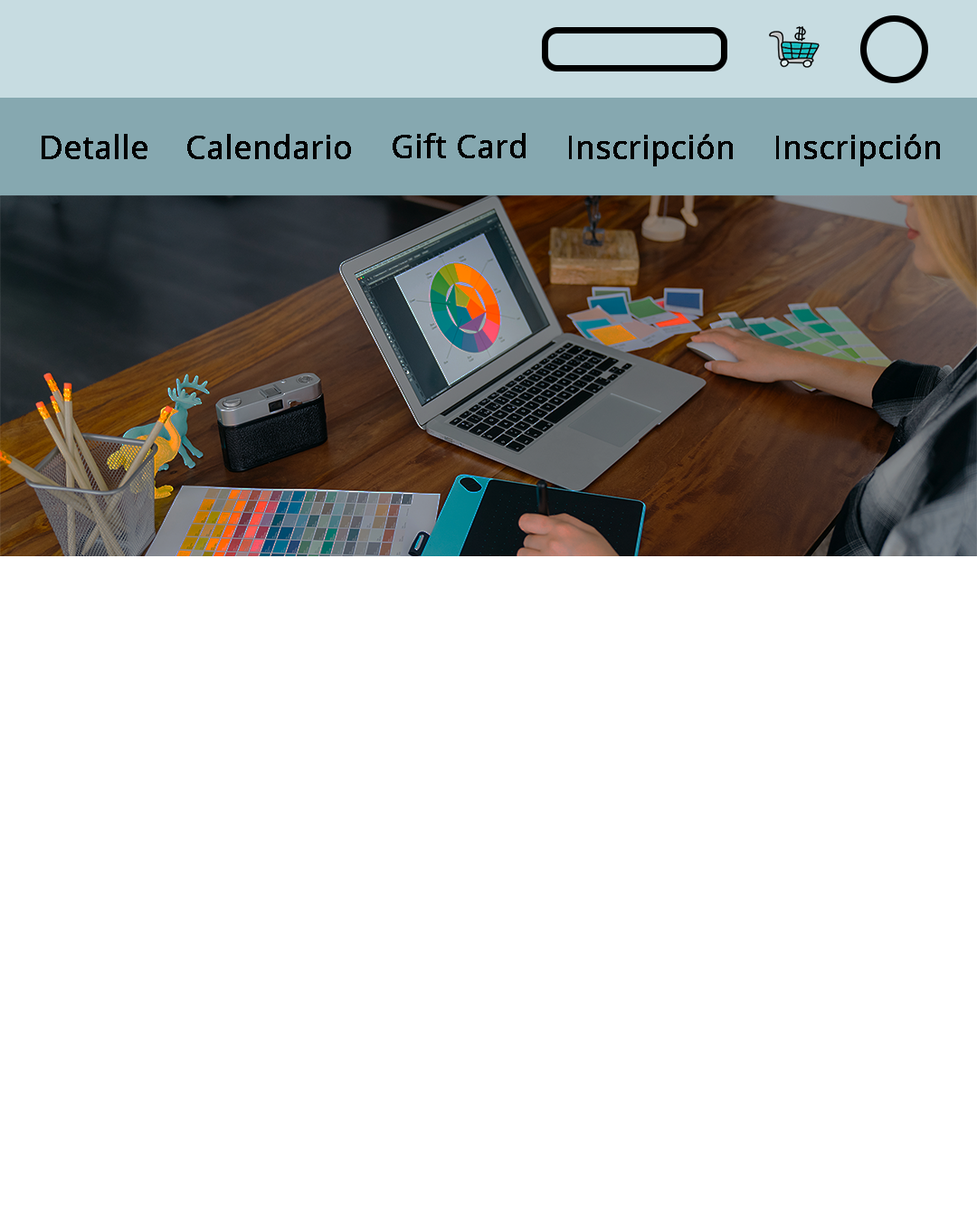
<style>
.page{position:relative;width:977px;height:1221px;background:#ffffff}
.page>*{position:absolute;margin:0}
.t1{font:31.7px "OpenSans-Regular";color:#000000;font-weight:bold}
</style>
<div class="page">
<p class="t1" style="left:42px;top:134px;width:105px;height:25px">Detalle</p>
<p class="t1" style="left:187px;top:134px;width:164px;height:25px">Calendario</p>
<p class="t1" style="left:392px;top:133px;width:133px;height:25px">Gift Card</p>
<p class="t1" style="left:569px;top:134px;width:164px;height:32px">Inscripción</p>
<p class="t1" style="left:776px;top:134px;width:164px;height:32px">Inscripción</p>
</div>
